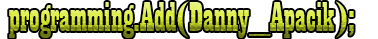
<style>
.page{position:relative;width:378px;height:39px;background:#ffffff}
.page>*{position:absolute;margin:0}
.t1{font:10.3px "Playbill"}
</style>
<div class="page">
<p class="t1" style="left:9px;top:1px;width:345px;height:37px">programming.Add(Danny_Apacik);</p>
</div>
